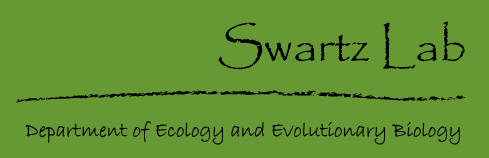
<style>
.page{position:relative;width:489px;height:158px;background:#669933}
.page>*{position:absolute;margin:0}
.t1{font:21px "BradleyHandITC";color:#000000}
</style>
<div class="page">
<p class="t1" style="left:25px;top:121px;width:435px;height:24px">Department of Ecology and Evolutionary Biology</p>
</div>
